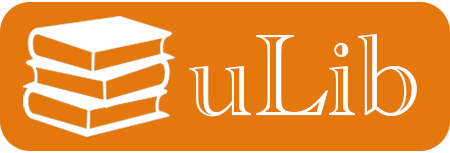
<style>
.page{position:relative;width:450px;height:153px;background:#e5780c}
.page>*{position:absolute;margin:0}
.t1{font:120px "AcademyEngravedLetPlain";color:#ffffff}
</style>
<div class="page">
<p class="t1" style="left:189px;top:34px;width:228px;height:83px">uLib</p>
</div>
